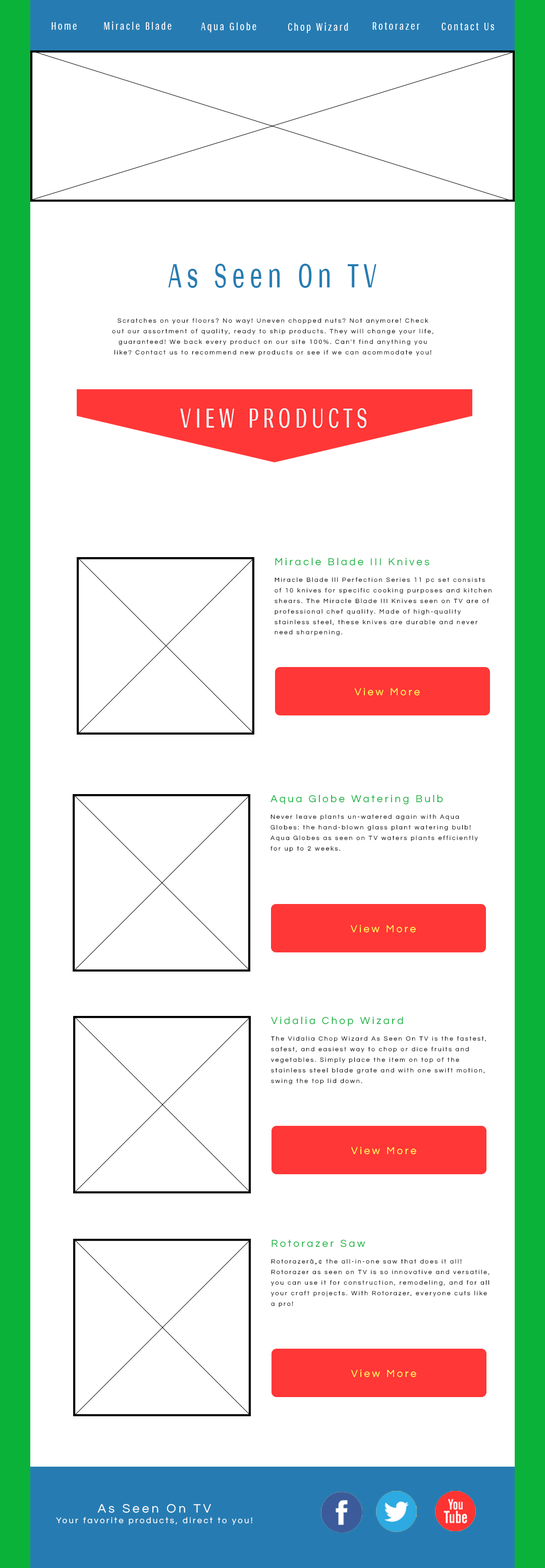
<style>
.page{position:relative;width:545px;height:1568px;background:#ffffff}
.page>*{position:absolute;margin:0}
.t1{font:12.6px "Arya-Regular";letter-spacing:0.2em;color:#ffffff;scale:0.67 1}
.t2{font:37.8px "Arya-Regular";letter-spacing:0.2em;color:#267cb2;scale:0.67 1}
.t3{font:6.3px/10.5px "Questrial-Regular";letter-spacing:0.2em;color:#000000}
.t4{font:6.3px/10.5px "Questrial-Regular";letter-spacing:0.2em}
.t5{font:10.5px/10.5px "Questrial-Regular";letter-spacing:0.2em}
.t6{font:10.5px "Questrial-Regular";letter-spacing:0.2em;color:#fffd5c}
.t7{font:10.5px/10.5px "Questrial-Regular";letter-spacing:0.2em;color:#0bb23a}
.t8{font:8.4px/10.5px "Questrial-Regular";letter-spacing:0.2em;color:#ffffff}
.t9{font:12.6px/10.5px "Questrial-Regular";letter-spacing:0.2em;color:#ffffff}
</style>
<div class="page">
<p class="t1" style="left:51px;top:22px;width:26px;height:8px">Home</p>
<p class="t1" style="left:104px;top:21px;width:67px;height:9px">Miracle Blade</p>
<p class="t1" style="left:201px;top:22px;width:55px;height:11px">Aqua Globe</p>
<p class="t1" style="left:288px;top:22px;width:60px;height:11px">Chop Wizard</p>
<p class="t1" style="left:372px;top:22px;width:47px;height:8px">Rotorazer</p>
<p class="t1" style="left:441px;top:23px;width:53px;height:7px">Contact Us</p>
<p class="t2" style="left:168px;top:264px;width:208px;height:24px">As Seen On TV</p>
<p class="t3" style="left:112px;top:318px;width:321px;height:38px;text-align:center">Scratches on your floors? No way! Uneven chopped nuts? Not anymore! Check out our assortment of quality, ready to ship products. They will change your life, guaranteed! We back every product on our site 100%. Can't find anything you like? Contact us to recommend new products or see if we can acommodate you!</p>
<p class="t4" style="left:274px;top:558px;width:217px;height:78px"><span class="t5">Miracle Blade III Knives<br></span>Miracle Blade lll Perfection Series 11 pc set consists of 10 knives for specific cooking purposes and kitchen shears. The Miracle Blade III Knives seen on TV are of professional chef quality. Made of high-quality stainless steel, these knives are durable and never need sharpening.</p>
<p class="t6" style="left:354px;top:688px;width:65px;height:8px">View More</p>
<p class="t3" style="left:270px;top:795px;width:207px;height:57px"><span class="t7">Aqua Globe Watering Bulb<br></span>Never leave plants un-watered again with Aqua Globes: the hand-blown glass plant watering bulb! Aqua Globes as seen on TV waters plants efficiently for up to 2 weeks.</p>
<p class="t6" style="left:350px;top:925px;width:65px;height:8px">View More</p>
<p class="t4" style="left:271px;top:1016px;width:215px;height:68px"><span class="t5">Vidalia Chop Wizard<br></span>The Vidalia Chop Wizard As Seen On TV is the fastest, safest, and easiest way to chop or dice fruits and vegetables. Simply place the item on top of the stainless steel blade grate and with one swift motion, swing the top lid down.</p>
<p class="t6" style="left:350px;top:1147px;width:66px;height:8px">View More</p>
<p class="t4" style="left:271px;top:1239px;width:218px;height:68px"><span class="t5">Rotorazer Saw<br></span>Rotorazerâ„¢ the all-in-one saw that does it all! Rotorazer as seen on TV is so innovative and versatile, you can use it for construction, remodeling, and for all your craft projects. With Rotorazer, everyone cuts like a pro!</p>
<p class="t6" style="left:350px;top:1369px;width:66px;height:8px">View More</p>
<p class="t8" style="left:56px;top:1504px;width:196px;height:21px;text-align:center"><span class="t9">As Seen On TV<br></span>Your favorite products, direct to you!</p>
</div>
